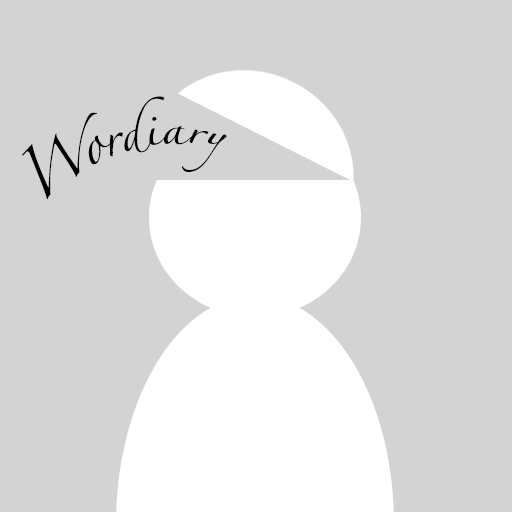
<style>
.page{position:relative;width:512px;height:512px;background:#d3d3d3}
.page>*{position:absolute;margin:0}
.t1{font:36.5px "Zapfino";color:#000000;scale:0.65 1}
</style>
<div class="page">
<p class="t1" style="left:22px;top:96px;width:205px;height:103px;rotate:-22deg">Wordiary</p>
</div>
